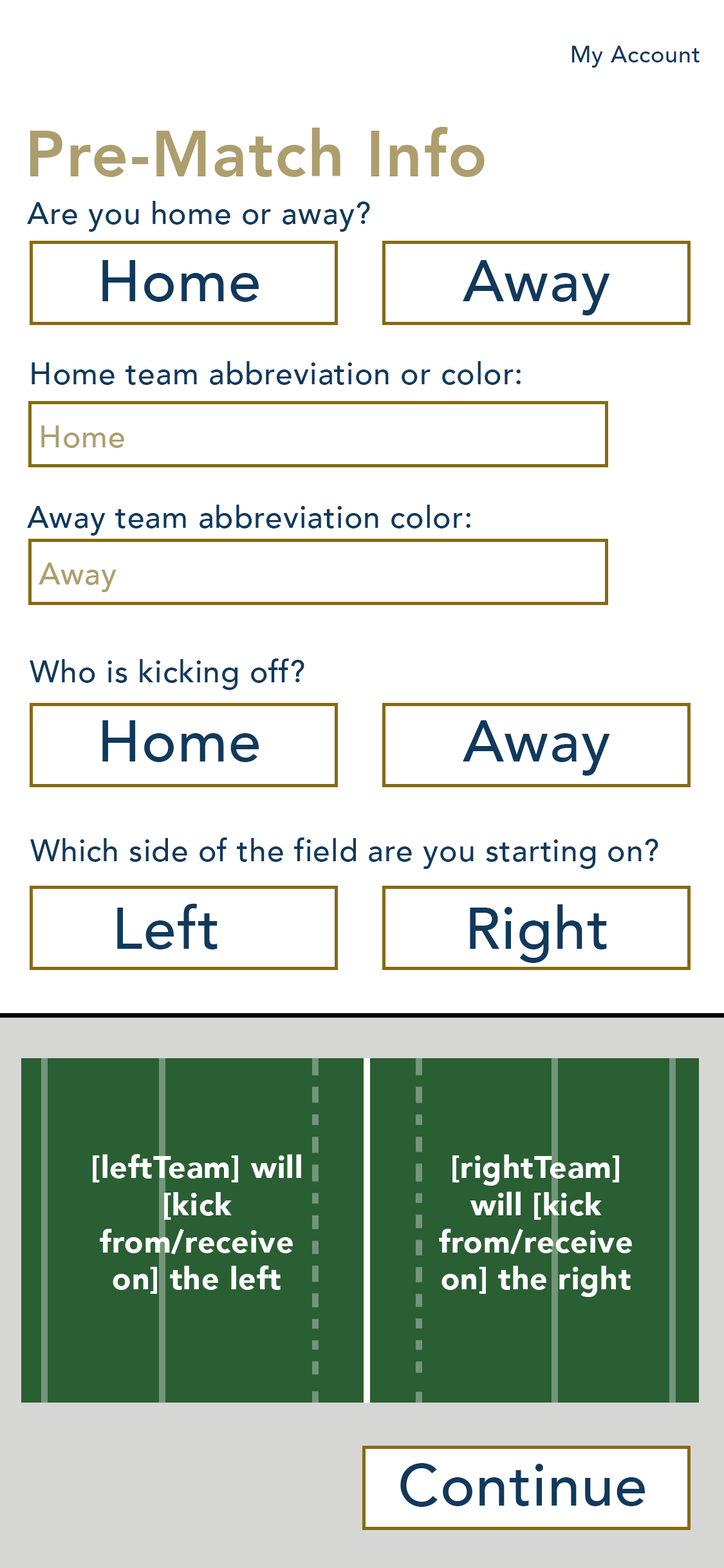
<style>
.page{position:relative;width:724px;height:1568px;background:#ffffff}
.page>*{position:absolute;margin:0}
.t1{font:23.2px "Avenir-Medium";letter-spacing:0.021em;color:#10395c}
.t2{font:64.6px "Avenir-Heavy";letter-spacing:0.021em;color:#ad9e6e}
.t3{font:30.9px "Avenir-Medium";letter-spacing:0.021em;color:#10395c}
.t4{font:58.4px "Avenir-Medium";letter-spacing:0.021em;color:#10395c}
.t5{font:30.9px "Avenir-Medium";letter-spacing:0.021em;color:#ad9e6e}
.t6{font:30.9px "Avenir-Black";letter-spacing:0.021em;color:#ffffff}
</style>
<div class="page">
<p class="t1" style="left:572px;top:46px;width:128px;height:22px">My Account</p>
<p class="t2" style="left:30px;top:127px;width:455px;height:50px">Pre-Match Info</p>
<p class="t3" style="left:27px;top:201px;width:343px;height:31px">Are you home or away?</p>
<p class="t4" style="left:102px;top:260px;width:157px;height:42px">Home</p>
<p class="t4" style="left:463px;top:260px;width:147px;height:55px">Away</p>
<p class="t3" style="left:32px;top:361px;width:489px;height:24px">Home team abbreviation or color:</p>
<p class="t5" style="left:41px;top:425px;width:83px;height:23px">Home</p>
<p class="t3" style="left:27px;top:505px;width:444px;height:31px">Away team abbreviation color:</p>
<p class="t5" style="left:39px;top:563px;width:78px;height:29px">Away</p>
<p class="t3" style="left:30px;top:658px;width:274px;height:32px">Who is kicking off?</p>
<p class="t4" style="left:102px;top:720px;width:157px;height:42px">Home</p>
<p class="t4" style="left:463px;top:720px;width:147px;height:56px">Away</p>
<p class="t3" style="left:30px;top:837px;width:628px;height:32px">Which side of the field are you starting on?</p>
<p class="t4" style="left:117px;top:904px;width:101px;height:45px">Left</p>
<p class="t4" style="left:470px;top:904px;width:137px;height:59px">Right</p>
<p class="t6" style="left:93px;top:1154px;width:208px;height:140px;text-align:center">[leftTeam] will [kick from/receive on] the left</p>
<p class="t6" style="left:439px;top:1154px;width:193px;height:143px;text-align:center">[rightTeam] will [kick from/receive on] the right</p>
<p class="t4" style="left:400px;top:1463px;width:245px;height:44px">Continue</p>
</div>
